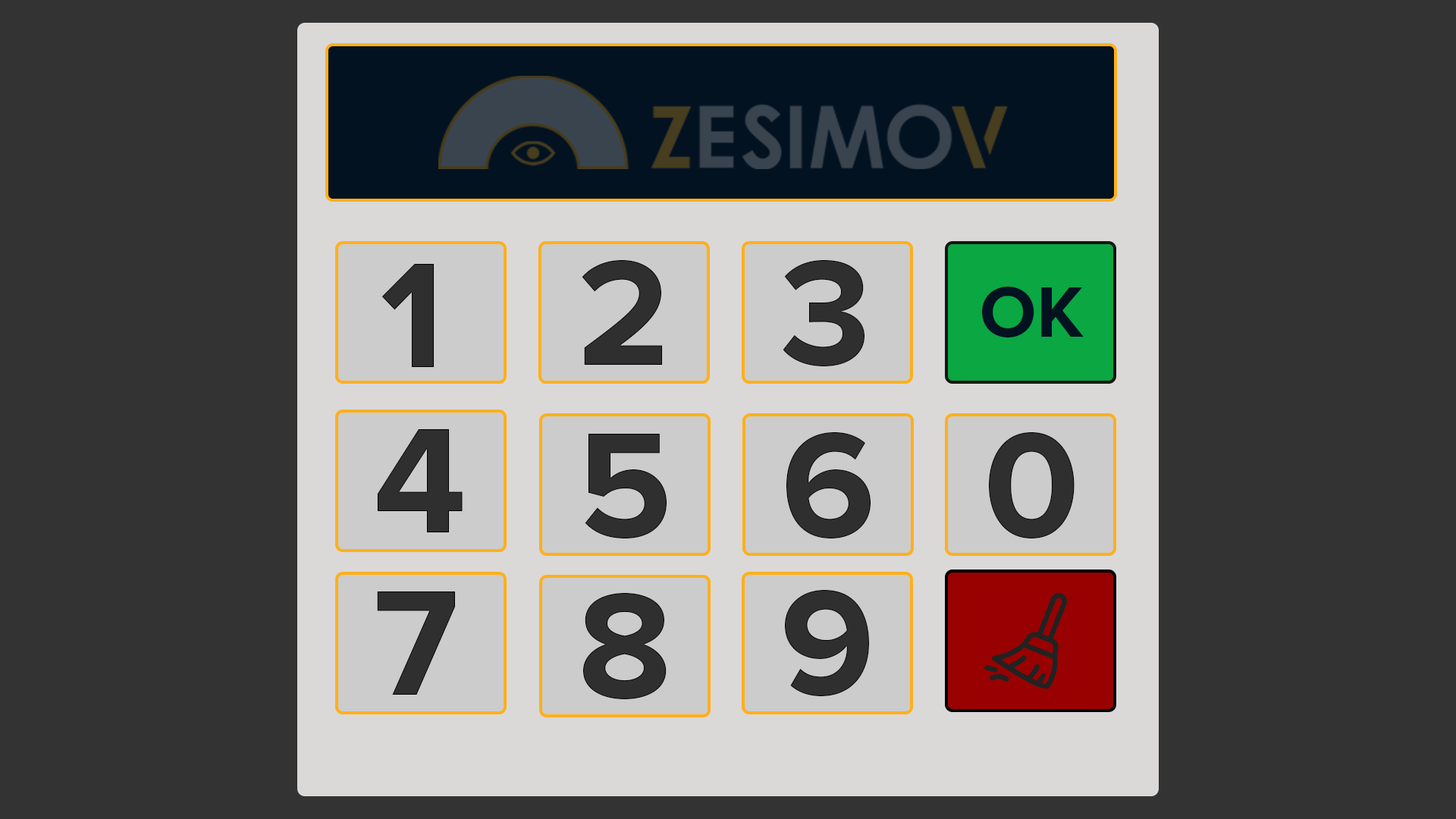
<style>
.page{position:relative;width:1456px;height:819px;background:#333333}
.page>*{position:absolute;margin:0}
.t1{font:154.7px "ProximaNova-Bold";color:#302f2f}
.t2{font:73.8px "ProximaNova-Bold";color:#031221}
</style>
<div class="page">
<p class="t1" style="left:381px;top:264px;width:53px;height:103px">1</p>
<p class="t1" style="left:582px;top:260px;width:81px;height:105px">2</p>
<p class="t1" style="left:783px;top:260px;width:81px;height:107px">3</p>
<p class="t2" style="left:982px;top:287px;width:102px;height:50px">OK</p>
<p class="t1" style="left:377px;top:429px;width:86px;height:103px">4</p>
<p class="t1" style="left:585px;top:434px;width:82px;height:105px">5</p>
<p class="t1" style="left:786px;top:432px;width:85px;height:107px">6</p>
<p class="t1" style="left:989px;top:432px;width:86px;height:107px">0</p>
<p class="t1" style="left:377px;top:591px;width:78px;height:104px">7</p>
<p class="t1" style="left:583px;top:592px;width:84px;height:108px">8</p>
<p class="t1" style="left:785px;top:590px;width:84px;height:107px">9</p>
</div>
